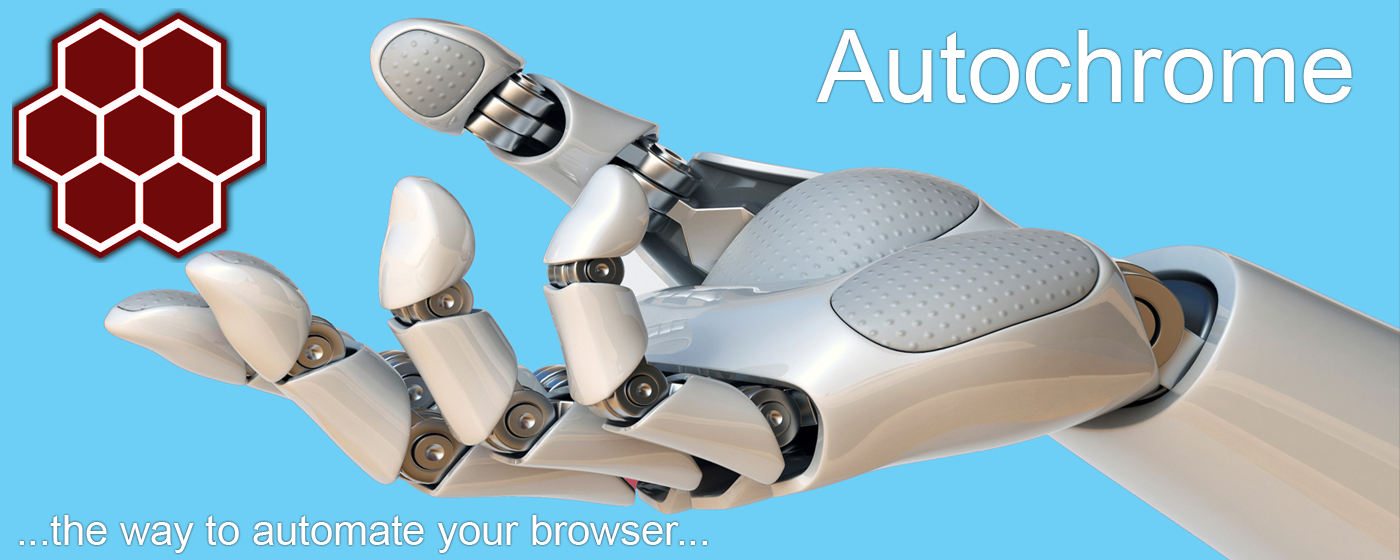
<style>
.page{position:relative;width:1400px;height:560px;background:#6dcff6}
.page>*{position:absolute;margin:0}
.t1{font:100px "ArialMT";color:#ffffff}
.t2{font:41.7px "ArialMT";color:#ffffff}
</style>
<div class="page">
<p class="t1" style="left:816px;top:30px;width:536px;height:73px">Autochrome</p>
<p class="t2" style="left:19px;top:515px;width:688px;height:38px">...the way to automate your browser...</p>
</div>
